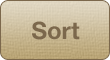
<style>
.page{position:relative;width:110px;height:60px}
.page>*{position:absolute;margin:0}
.t1{font:24px "HelveticaNeue-Bold";color:#7c684c}
</style>
<div class="page">
<p class="t1" style="left:32px;top:21px;width:48px;height:19px">Sort</p>
</div>
